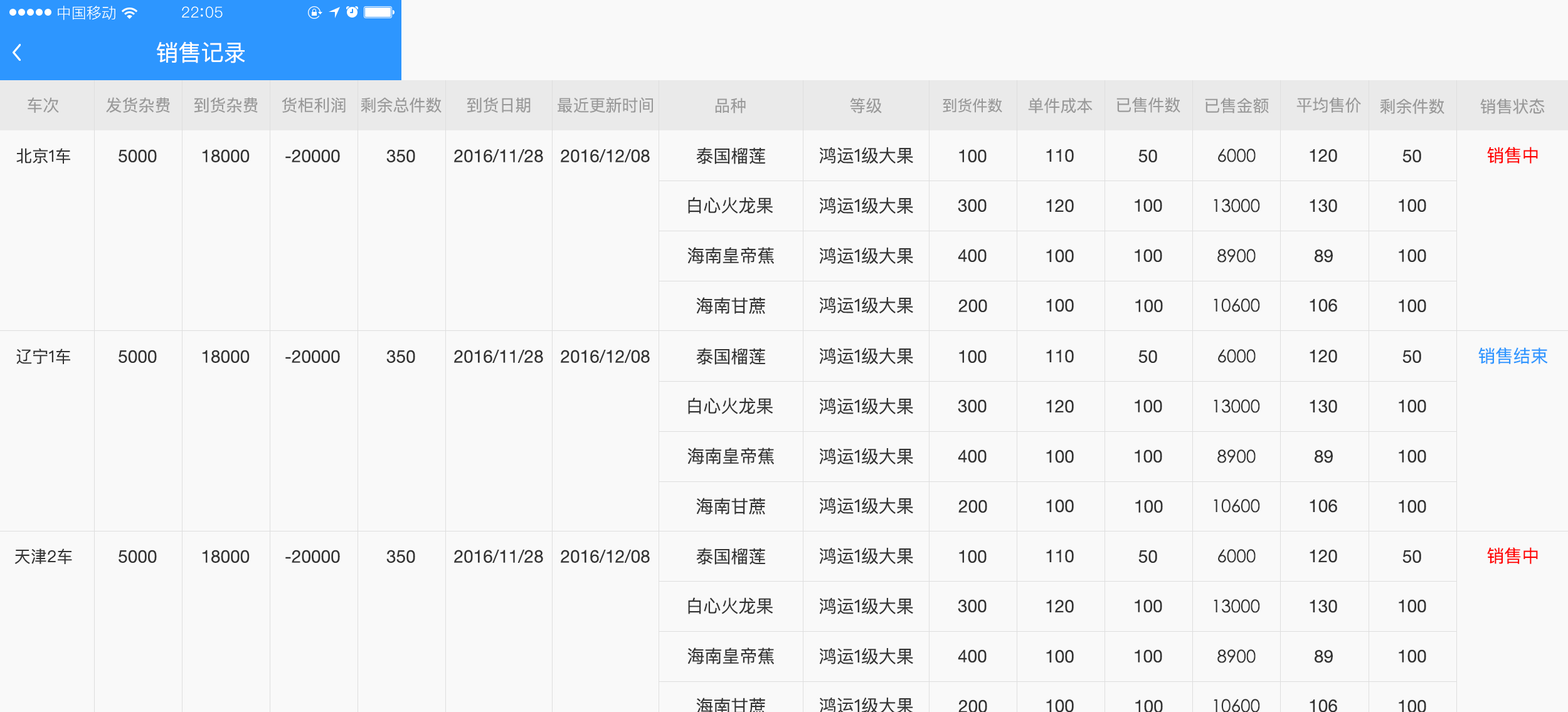
<style>
.page{position:relative;width:1568px;height:712px;background:#f9f9f9}
.page>*{position:absolute;margin:0}
.t1{font:15.1px "PingFang-SC-Regular";color:#ffffff}
.t2{font:22.6px "PingFangSC-Regular";color:#ffffff}
.t3{font:16.3px "PingFangSC-Regular";color:#999999}
.t4{font:15.1px "PingFangSC-Regular";color:#999999}
.t5{font:16.3px "PingFangSC-Regular";color:#333333}
.t6{font:17.6px "HelveticaNeue";color:#333333}
.t7{font:17.6px "PingFangSC-Regular";color:#333333}
.t8{font:17.6px "STHeitiSC-Light";color:#333333}
.t9{font:17.6px "PingFangSC-Regular";color:#ff0000}
.t10{font:17.6px "PingFangSC-Regular";color:#2d96ff}
</style>
<div class="page">
<p class="t1" style="left:58px;top:6px;width:57px;height:14px">中国移动</p>
<p class="t2" style="left:156px;top:41px;width:89px;height:22px">销售记录</p>
<p class="t3" style="left:28px;top:97px;width:31px;height:16px">车次</p>
<p class="t3" style="left:106px;top:97px;width:64px;height:16px">发货杂费</p>
<p class="t3" style="left:194px;top:97px;width:64px;height:16px">到货杂费</p>
<p class="t3" style="left:282px;top:97px;width:64px;height:16px">货柜利润</p>
<p class="t3" style="left:361px;top:97px;width:81px;height:16px">剩余总件数</p>
<p class="t3" style="left:467px;top:97px;width:64px;height:16px">到货日期</p>
<p class="t3" style="left:558px;top:97px;width:95px;height:16px">最近更新时间</p>
<p class="t3" style="left:715px;top:98px;width:31px;height:16px">品种</p>
<p class="t3" style="left:850px;top:98px;width:32px;height:16px">等级</p>
<p class="t4" style="left:943px;top:98px;width:59px;height:15px">到货件数</p>
<p class="t3" style="left:1028px;top:98px;width:65px;height:16px">单件成本</p>
<p class="t3" style="left:1116px;top:97px;width:64px;height:16px">已售件数</p>
<p class="t3" style="left:1205px;top:98px;width:64px;height:16px">已售金额</p>
<p class="t3" style="left:1296px;top:97px;width:65px;height:16px">平均售价</p>
<p class="t3" style="left:1380px;top:98px;width:64px;height:16px">剩余件数</p>
<p class="t3" style="left:1480px;top:98px;width:65px;height:16px">销售状态</p>
<p class="t5" style="left:16px;top:148px;width:54px;height:16px">北京1车</p>
<p class="t6" style="left:119px;top:149px;width:38px;height:13px">5000</p>
<p class="t6" style="left:202px;top:149px;width:48px;height:13px">18000</p>
<p class="t6" style="left:285px;top:149px;width:55px;height:13px">-20000</p>
<p class="t6" style="left:386px;top:149px;width:29px;height:13px">350</p>
<p class="t6" style="left:454px;top:149px;width:89px;height:13px">2016/11/28</p>
<p class="t6" style="left:561px;top:149px;width:89px;height:13px">2016/12/08</p>
<p class="t7" style="left:696px;top:147px;width:70px;height:17px">泰国榴莲</p>
<p class="t7" style="left:819px;top:147px;width:94px;height:17px">鸿运1级大果</p>
<p class="t6" style="left:959px;top:149px;width:28px;height:13px">100</p>
<p class="t6" style="left:1046px;top:149px;width:28px;height:13px">110</p>
<p class="t6" style="left:1138px;top:149px;width:19px;height:13px">50</p>
<p class="t8" style="left:1218px;top:149px;width:38px;height:13px">6000</p>
<p class="t6" style="left:1310px;top:149px;width:27px;height:13px">120</p>
<p class="t6" style="left:1402px;top:149px;width:19px;height:13px">50</p>
<p class="t9" style="left:1487px;top:147px;width:51px;height:17px">销售中</p>
<p class="t7" style="left:688px;top:197px;width:85px;height:17px">白心火龙果</p>
<p class="t7" style="left:819px;top:198px;width:94px;height:16px">鸿运1级大果</p>
<p class="t6" style="left:958px;top:199px;width:29px;height:13px">300</p>
<p class="t6" style="left:1046px;top:199px;width:28px;height:14px">120</p>
<p class="t6" style="left:1135px;top:199px;width:27px;height:13px">100</p>
<p class="t8" style="left:1214px;top:199px;width:46px;height:14px">13000</p>
<p class="t6" style="left:1310px;top:199px;width:27px;height:14px">130</p>
<p class="t6" style="left:1399px;top:199px;width:27px;height:13px">100</p>
<p class="t7" style="left:687px;top:247px;width:87px;height:17px">海南皇帝蕉</p>
<p class="t7" style="left:819px;top:248px;width:94px;height:16px">鸿运1级大果</p>
<p class="t6" style="left:958px;top:249px;width:29px;height:13px">400</p>
<p class="t6" style="left:1046px;top:250px;width:28px;height:13px">100</p>
<p class="t6" style="left:1135px;top:249px;width:27px;height:13px">100</p>
<p class="t8" style="left:1217px;top:249px;width:39px;height:14px">8900</p>
<p class="t6" style="left:1315px;top:250px;width:18px;height:13px">89</p>
<p class="t6" style="left:1399px;top:249px;width:27px;height:13px">100</p>
<p class="t7" style="left:696px;top:297px;width:69px;height:17px">海南甘蔗</p>
<p class="t7" style="left:819px;top:297px;width:94px;height:17px">鸿运1级大果</p>
<p class="t6" style="left:958px;top:299px;width:29px;height:13px">200</p>
<p class="t6" style="left:1046px;top:299px;width:28px;height:13px">100</p>
<p class="t6" style="left:1135px;top:299px;width:28px;height:13px">100</p>
<p class="t8" style="left:1214px;top:299px;width:46px;height:13px">10600</p>
<p class="t6" style="left:1310px;top:299px;width:27px;height:13px">106</p>
<p class="t6" style="left:1399px;top:299px;width:27px;height:13px">100</p>
<p class="t5" style="left:16px;top:349px;width:54px;height:15px">辽宁1车</p>
<p class="t6" style="left:119px;top:350px;width:38px;height:13px">5000</p>
<p class="t6" style="left:202px;top:350px;width:48px;height:13px">18000</p>
<p class="t6" style="left:285px;top:350px;width:55px;height:13px">-20000</p>
<p class="t6" style="left:386px;top:350px;width:29px;height:13px">350</p>
<p class="t6" style="left:454px;top:350px;width:89px;height:13px">2016/11/28</p>
<p class="t6" style="left:561px;top:350px;width:89px;height:13px">2016/12/08</p>
<p class="t7" style="left:696px;top:348px;width:70px;height:17px">泰国榴莲</p>
<p class="t7" style="left:819px;top:348px;width:94px;height:16px">鸿运1级大果</p>
<p class="t6" style="left:959px;top:350px;width:28px;height:13px">100</p>
<p class="t6" style="left:1046px;top:350px;width:28px;height:13px">110</p>
<p class="t6" style="left:1138px;top:350px;width:19px;height:13px">50</p>
<p class="t8" style="left:1218px;top:349px;width:38px;height:14px">6000</p>
<p class="t6" style="left:1310px;top:350px;width:27px;height:13px">120</p>
<p class="t6" style="left:1402px;top:350px;width:19px;height:13px">50</p>
<p class="t10" style="left:1478px;top:347px;width:70px;height:17px">销售结束</p>
<p class="t7" style="left:688px;top:398px;width:85px;height:17px">白心火龙果</p>
<p class="t7" style="left:819px;top:398px;width:94px;height:17px">鸿运1级大果</p>
<p class="t6" style="left:958px;top:400px;width:29px;height:13px">300</p>
<p class="t6" style="left:1046px;top:400px;width:28px;height:13px">120</p>
<p class="t6" style="left:1135px;top:400px;width:27px;height:13px">100</p>
<p class="t8" style="left:1214px;top:400px;width:46px;height:13px">13000</p>
<p class="t6" style="left:1310px;top:400px;width:27px;height:13px">130</p>
<p class="t6" style="left:1399px;top:400px;width:27px;height:13px">100</p>
<p class="t7" style="left:687px;top:448px;width:87px;height:17px">海南皇帝蕉</p>
<p class="t7" style="left:819px;top:448px;width:94px;height:17px">鸿运1级大果</p>
<p class="t6" style="left:958px;top:450px;width:29px;height:13px">400</p>
<p class="t6" style="left:1135px;top:450px;width:27px;height:13px">100</p>
<p class="t8" style="left:1217px;top:450px;width:39px;height:14px">8900</p>
<p class="t6" style="left:1399px;top:450px;width:27px;height:13px">100</p>
<p class="t6" style="left:1046px;top:450px;width:28px;height:14px">100</p>
<p class="t6" style="left:1315px;top:450px;width:18px;height:14px">89</p>
<p class="t7" style="left:696px;top:498px;width:69px;height:17px">海南甘蔗</p>
<p class="t7" style="left:819px;top:498px;width:94px;height:16px">鸿运1级大果</p>
<p class="t6" style="left:958px;top:500px;width:29px;height:13px">200</p>
<p class="t6" style="left:1046px;top:500px;width:28px;height:13px">100</p>
<p class="t6" style="left:1135px;top:500px;width:28px;height:13px">100</p>
<p class="t8" style="left:1214px;top:499px;width:46px;height:14px">10600</p>
<p class="t6" style="left:1310px;top:500px;width:27px;height:13px">106</p>
<p class="t6" style="left:1399px;top:500px;width:27px;height:13px">100</p>
<p class="t5" style="left:14px;top:549px;width:58px;height:15px">天津2车</p>
<p class="t6" style="left:119px;top:550px;width:38px;height:13px">5000</p>
<p class="t6" style="left:202px;top:550px;width:48px;height:13px">18000</p>
<p class="t6" style="left:285px;top:550px;width:55px;height:13px">-20000</p>
<p class="t6" style="left:386px;top:550px;width:29px;height:13px">350</p>
<p class="t6" style="left:454px;top:550px;width:89px;height:13px">2016/11/28</p>
<p class="t6" style="left:561px;top:550px;width:89px;height:13px">2016/12/08</p>
<p class="t7" style="left:696px;top:548px;width:70px;height:17px">泰国榴莲</p>
<p class="t7" style="left:819px;top:548px;width:94px;height:16px">鸿运1级大果</p>
<p class="t6" style="left:959px;top:550px;width:28px;height:13px">100</p>
<p class="t6" style="left:1046px;top:550px;width:28px;height:13px">110</p>
<p class="t6" style="left:1138px;top:550px;width:19px;height:13px">50</p>
<p class="t8" style="left:1218px;top:549px;width:38px;height:14px">6000</p>
<p class="t6" style="left:1310px;top:550px;width:27px;height:13px">120</p>
<p class="t6" style="left:1402px;top:550px;width:19px;height:13px">50</p>
<p class="t9" style="left:1487px;top:548px;width:51px;height:16px">销售中</p>
<p class="t7" style="left:688px;top:598px;width:85px;height:17px">白心火龙果</p>
<p class="t7" style="left:819px;top:598px;width:94px;height:17px">鸿运1级大果</p>
<p class="t6" style="left:958px;top:600px;width:29px;height:13px">300</p>
<p class="t6" style="left:1046px;top:600px;width:28px;height:13px">120</p>
<p class="t6" style="left:1135px;top:600px;width:27px;height:13px">100</p>
<p class="t8" style="left:1214px;top:600px;width:46px;height:13px">13000</p>
<p class="t6" style="left:1310px;top:600px;width:27px;height:13px">130</p>
<p class="t6" style="left:1399px;top:600px;width:27px;height:13px">100</p>
<p class="t7" style="left:687px;top:648px;width:87px;height:17px">海南皇帝蕉</p>
<p class="t7" style="left:819px;top:649px;width:94px;height:16px">鸿运1级大果</p>
<p class="t6" style="left:958px;top:650px;width:29px;height:13px">400</p>
<p class="t6" style="left:1046px;top:650px;width:28px;height:14px">100</p>
<p class="t6" style="left:1135px;top:650px;width:27px;height:13px">100</p>
<p class="t8" style="left:1217px;top:650px;width:39px;height:14px">8900</p>
<p class="t6" style="left:1315px;top:650px;width:18px;height:14px">89</p>
<p class="t6" style="left:1399px;top:650px;width:27px;height:13px">100</p>
<p class="t6" style="left:958px;top:700px;width:29px;height:13px">200</p>
<p class="t6" style="left:1046px;top:700px;width:28px;height:13px">100</p>
<p class="t6" style="left:1135px;top:700px;width:28px;height:13px">100</p>
<p class="t8" style="left:1214px;top:699px;width:46px;height:14px">10600</p>
<p class="t6" style="left:1310px;top:700px;width:27px;height:13px">106</p>
<p class="t6" style="left:1399px;top:700px;width:27px;height:13px">100</p>
</div>
